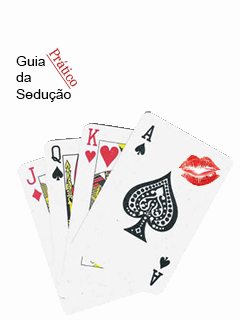
<style>
.page{position:relative;width:240px;height:320px;background:#fefdfd}
.page>*{position:absolute;margin:0}
.t1{font:14px "SchadowBT-Roman";color:#b91919;text-decoration:underline}
.t2{font:14px "DokChampa";color:#000000}
</style>
<div class="page">
<p class="t1" style="left:46px;top:47px;width:31px;height:43px;rotate:55deg">Prático</p>
<p class="t2" style="left:16px;top:56px;width:55px;height:46px;text-align:right">Guia<br>da<br>Sedução</p>
</div>
